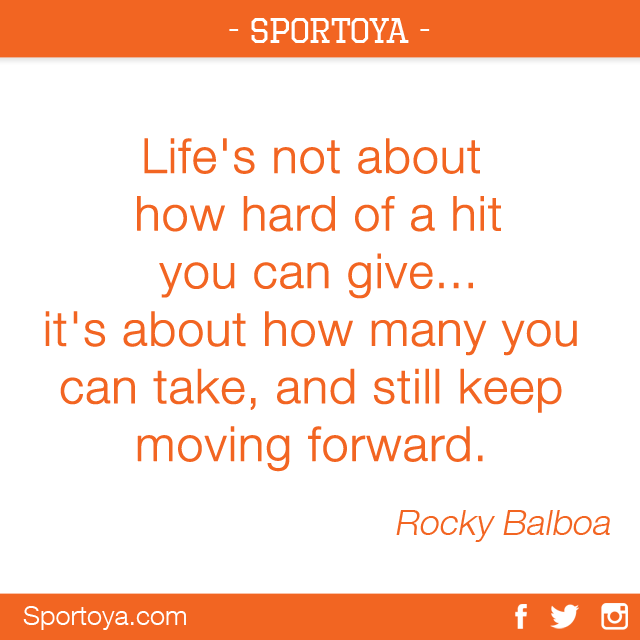
<style>
.page{position:relative;width:640px;height:640px;background:#ffffff}
.page>*{position:absolute;margin:0}
.t1{font:36px "OctinSportsRg-Regular";color:#ffffff}
.t2{font:48px "HelveticaNeueLTCom-Lt";color:#f26522;font-weight:bold}
.t3{font:36px "HelveticaNeueLTCom-Lt";color:#f26522;font-style:italic}
.t4{font:27px "HelveticaNeueLTCom-Lt";color:#ffffff}
</style>
<div class="page">
<p class="t1" style="left:229px;top:18px;width:201px;height:25px">- SPORTOYA -</p>
<p class="t2" style="left:45px;top:138px;width:532px;height:334px;text-align:center">Life's not about<br> how hard of a hit<br> you can give... <br>it's about how many you can take, and still keep moving forward.</p>
<p class="t3" style="left:396px;top:510px;width:214px;height:32px">Rocky Balboa</p>
<p class="t4" style="left:23px;top:606px;width:163px;height:24px">Sportoya.com</p>
</div>
